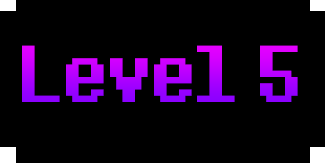
<style>
.page{position:relative;width:325px;height:163px;background:#000000}
.page>*{position:absolute;margin:0}
.t1{font:100px "8bitoperator-JVE"}
</style>
<div class="page">
<p class="t1" style="left:22px;top:45px;width:276px;height:57px">Level 5</p>
</div>
